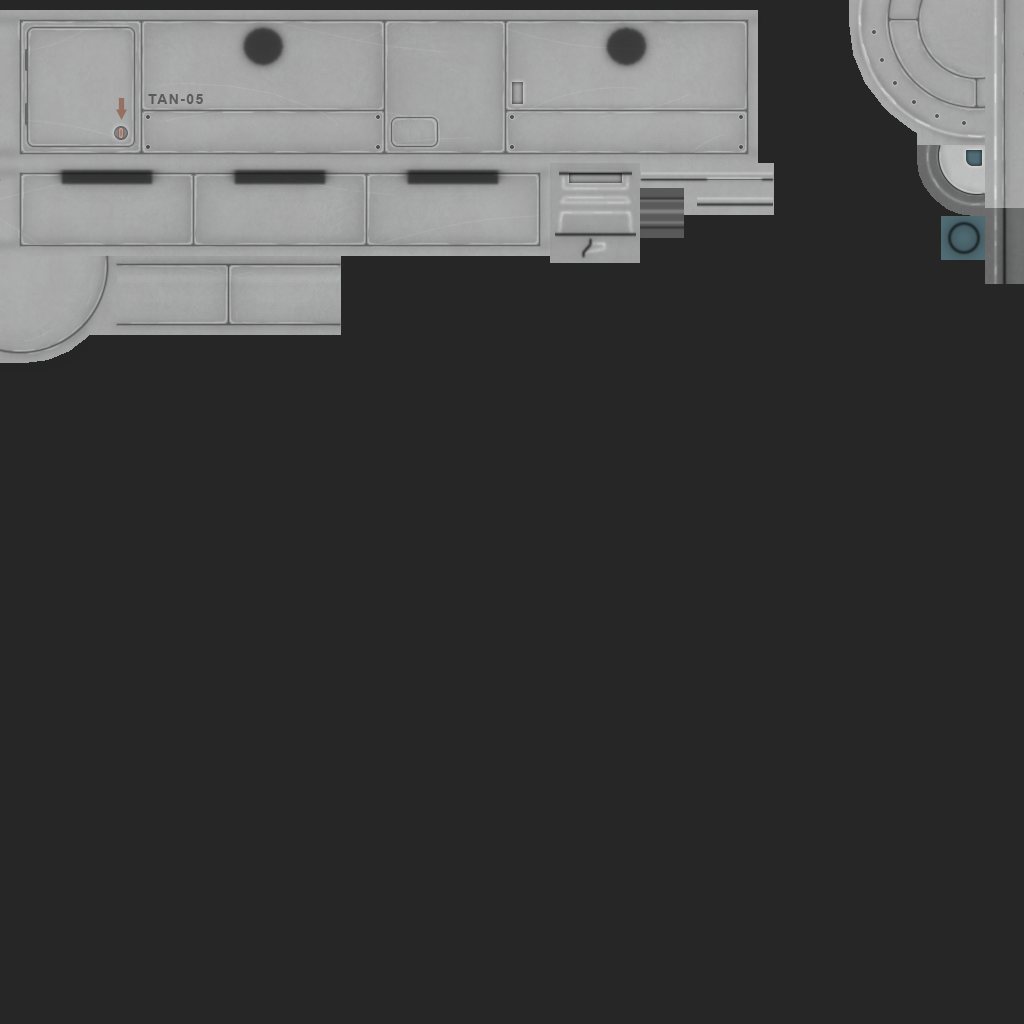
<style>
.page{position:relative;width:1024px;height:1024px;background:#262626}
.page>*{position:absolute;margin:0}
.t1{font:14px "Arial-BoldMT";letter-spacing:0.1em;color:#5b5c5c}
</style>
<div class="page">
<p class="t1" style="left:148px;top:94px;width:55px;height:10px">TAN-05</p>
</div>
